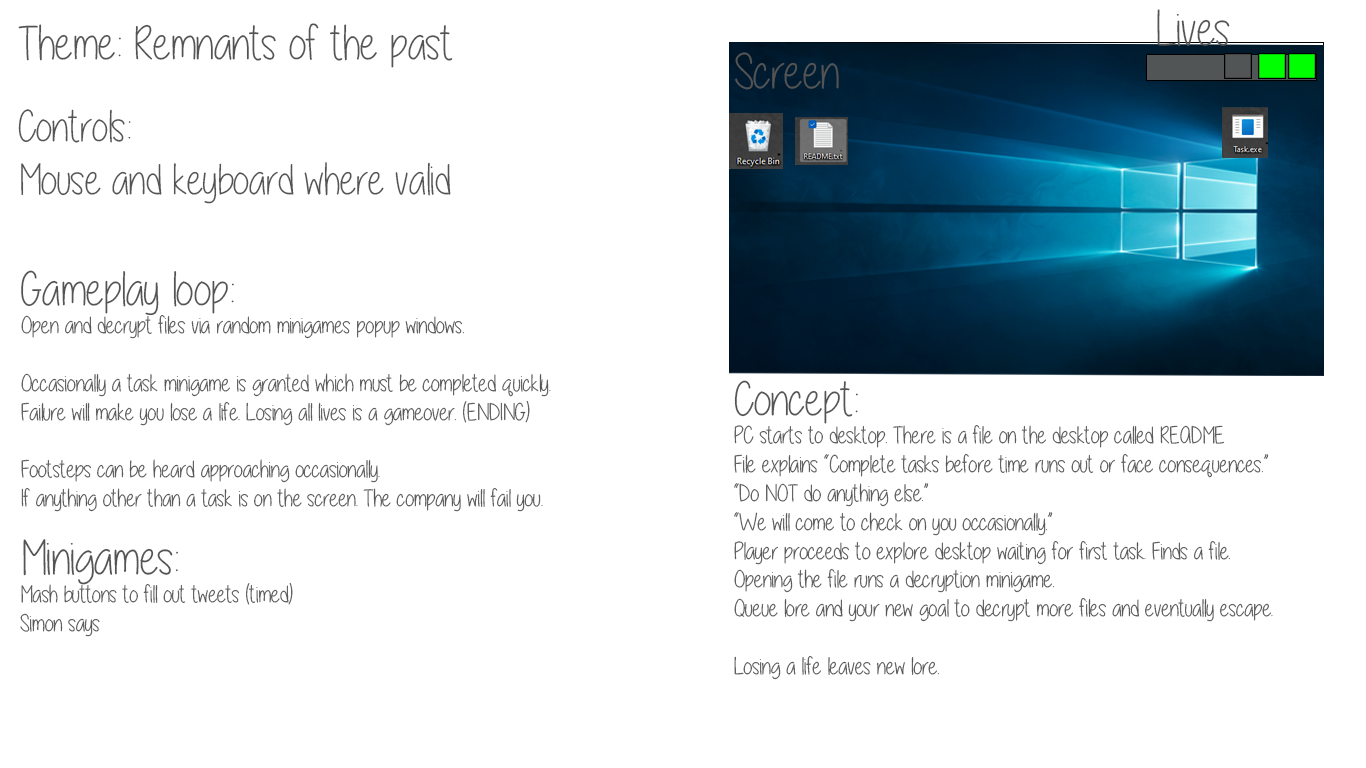
<style>
.page{position:relative;width:1366px;height:768px;background:#ffffff}
.page>*{position:absolute;margin:0}
.t1{font:50px "A-little-sunshine";color:#545454}
.t2{font:48px "A-little-sunshine";color:#545454}
.t3{font:44.3px "A-little-sunshine";color:#545454}
.t4{font:24px "A-little-sunshine";color:#545454}
</style>
<div class="page">
<p class="t1" style="left:1157px;top:9px;width:73px;height:37px">Lives</p>
<p class="t2" style="left:18px;top:23px;width:435px;height:45px">Theme: Remnants of the past</p>
<p class="t1" style="left:735px;top:52px;width:104px;height:38px">Screen</p>
<p class="t3" style="left:18px;top:109px;width:433px;height:95px">Controls:<br>Mouse and keyboard where valid</p>
<p class="t4" style="left:21px;top:270px;width:530px;height:242px"><span class="t2">Gameplay loop:<br></span>Open and decrypt files via random minigames popup windows.<br><br>Occasionally a task minigame is granted which must be completed quickly.<br>Failure will make you lose a life. Losing all lives is a gameover. (ENDING)<br><br>Footsteps can be heard approaching occasionally. <br>If anything other than a task is on the screen. The company will fail you.</p>
<p class="t4" style="left:734px;top:380px;width:539px;height:300px"><span class="t2">Concept:<br></span>PC starts to desktop. There is a file on the desktop called README<br>File explains “Complete tasks before time runs out or face consequences.”<br>“Do NOT do anything else.”<br>“We will come to check on you occasionally.”<br>Player proceeds to explore desktop waiting for first task. Finds a file.<br>Opening the file runs a decryption minigame.<br>Queue lore and your new goal to decrypt more files and eventually escape.<br><br>Losing a life leaves new lore.</p>
<p class="t4" style="left:20px;top:539px;width:273px;height:98px"><span class="t1">Minigames:<br></span>Mash buttons to fill out tweets (timed)<br>Simon says</p>
</div>
